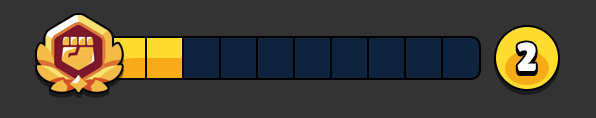
<style>
.page{position:relative;width:596px;height:118px;background:#333333}
.page>*{position:absolute;margin:0}
.t1{font:40px "LilitaOne";color:#ffffff;text-transform:uppercase}
</style>
<div class="page">
<p class="t1" style="left:517px;top:42px;width:19px;height:29px">2</p>
</div>
